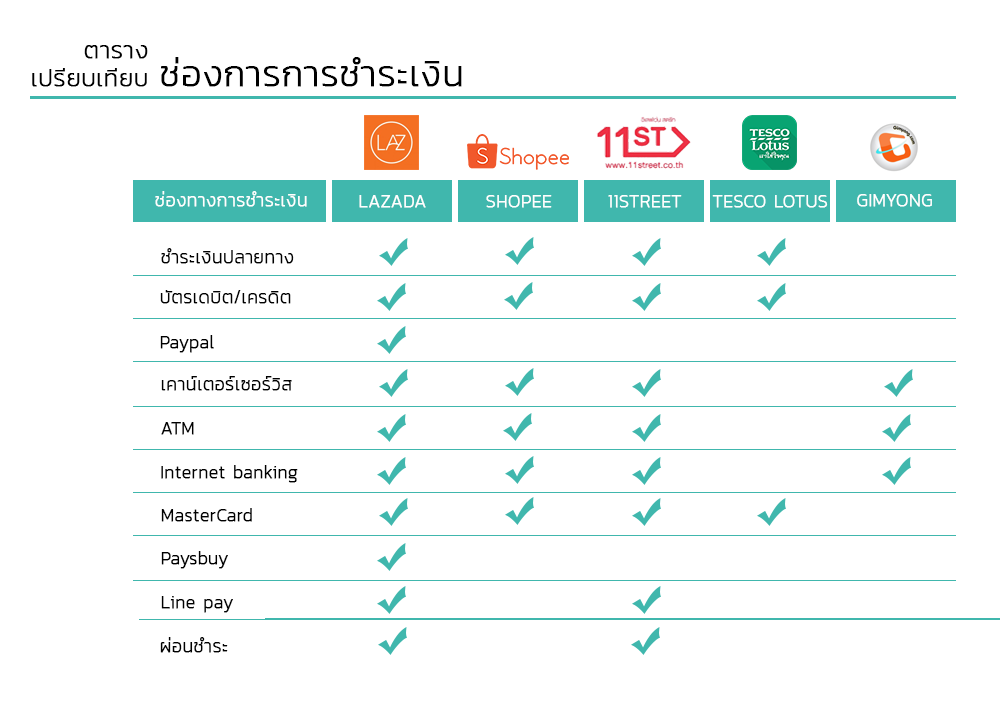
<style>
.page{position:relative;width:1000px;height:726px;background:#ffffff}
.page>*{position:absolute;margin:0}
.t1{font:36px/28px "Kanit-ExtraLight";color:#000000;font-weight:bold}
.t2{font:24px/28px "Kanit-ExtraLight";color:#000000;font-weight:bold}
.t3{font:18px "Kanit-ExtraLight";color:#ffffff;font-weight:bold}
.t4{font:18px "Kanit-ExtraLight";color:#000000;font-weight:bold}
</style>
<div class="page">
<p class="t1" style="left:32px;top:45px;width:430px;height:42px"><span class="t2">     ตาราง<br>เปรียบเทียบ </span>ช่องการการชำระเงิน</p>
<p class="t3" style="left:155px;top:191px;width:152px;height:16px">ช่องทางการชำระเงิน</p>
<p class="t3" style="left:359px;top:195px;width:67px;height:13px">LAZADA</p>
<p class="t3" style="left:486px;top:195px;width:66px;height:13px">SHOPEE</p>
<p class="t3" style="left:608px;top:195px;width:74px;height:13px">11STREET</p>
<p class="t3" style="left:712px;top:195px;width:116px;height:13px">TESCO LOTUS</p>
<p class="t3" style="left:857px;top:194px;width:75px;height:13px">GIMYONG</p>
<p class="t4" style="left:161px;top:248px;width:133px;height:16px">ชำระเงินปลายทาง</p>
<p class="t4" style="left:160px;top:290px;width:131px;height:14px">บัตรเดบิต/เครดิต</p>
<p class="t4" style="left:160px;top:335px;width:54px;height:18px">Paypal</p>
<p class="t4" style="left:161px;top:376px;width:131px;height:15px">เคาน์เตอร์เซอร์วิส</p>
<p class="t4" style="left:161px;top:422px;width:33px;height:13px">ATM</p>
<p class="t4" style="left:161px;top:465px;width:137px;height:18px">Internet banking</p>
<p class="t4" style="left:161px;top:508px;width:91px;height:14px">MasterCard</p>
<p class="t4" style="left:161px;top:551px;width:67px;height:18px">Paysbuy</p>
<p class="t4" style="left:161px;top:596px;width:72px;height:17px">Line pay</p>
<p class="t4" style="left:160px;top:637px;width:68px;height:16px">ผ่อนชำระ</p>
</div>
